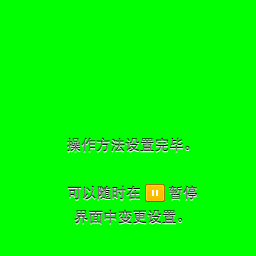
<style>
.page{position:relative;width:256px;height:256px;background:#00ff00}
.page>*{position:absolute;margin:0}
.t1{font:14.7px/24px "DFPHeiW5-GB"}
.t2{font:14.7px/24px "DFPHeiW5-GB";letter-spacing:1.56em}
</style>
<div class="page">
<p class="t1" style="left:67px;top:137px;width:130px;height:87px;text-align:center">操作方法设置完毕。<br><br>可以随时<span class="t2">在</span> 暂停<br>界面中变更设置。</p>
</div>
